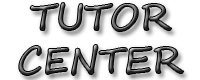
<style>
.page{position:relative;width:200px;height:80px;background:#ffffff}
.page>*{position:absolute;margin:0}
.t1{font:36px "SegoeScript"}
</style>
<div class="page">
<p class="t1" style="left:19px;top:3px;width:165px;height:72px;text-align:center">TUTOR<br>CENTER</p>
</div>
